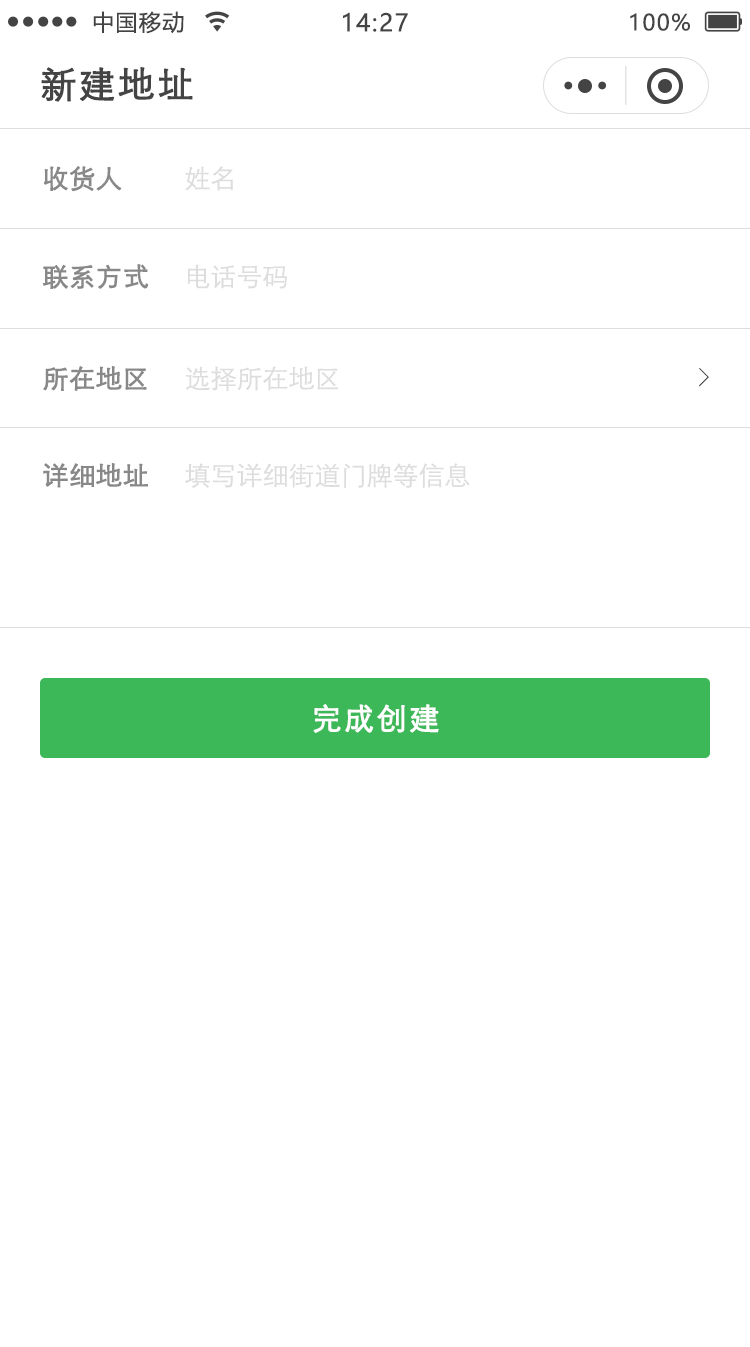
<style>
.page{position:relative;width:750px;height:1347px;background:#ffffff}
.page>*{position:absolute;margin:0}
.t1{font:22px "MicrosoftYaHei";letter-spacing:0.06em;color:#444444}
.t2{font:24px "MicrosoftYaHei";letter-spacing:0.06em;color:#444444}
.t3{font:36px "STXihei";letter-spacing:0.06em;color:#444444;font-weight:bold}
.t4{font:26px "STXihei";color:#888888;font-weight:bold}
.t5{font:26px "STXihei";color:#dddddd}
.t6{font:26px "SimSun";color:#444444}
.t7{font:30px "STXihei";letter-spacing:0.06em;color:#ffffff;font-weight:bold}
</style>
<div class="page">
<p class="t1" style="left:93px;top:11px;width:91px;height:23px">中国移动</p>
<p class="t2" style="left:343px;top:12px;width:65px;height:20px">14:27</p>
<p class="t1" style="left:630px;top:13px;width:60px;height:18px">100%</p>
<p class="t3" style="left:41px;top:67px;width:152px;height:35px">新建地址</p>
<p class="t4" style="left:43px;top:166px;width:79px;height:26px">收货人</p>
<p class="t5" style="left:185px;top:166px;width:48px;height:25px">姓名</p>
<p class="t4" style="left:42px;top:264px;width:107px;height:25px">联系方式</p>
<p class="t5" style="left:187px;top:264px;width:100px;height:25px">电话号码</p>
<p class="t4" style="left:43px;top:366px;width:104px;height:25px">所在地区</p>
<p class="t5" style="left:185px;top:366px;width:153px;height:25px">选择所在地区</p>
<p class="t6" style="left:699px;top:368px;width:10px;height:19px">&gt;</p>
<p class="t4" style="left:43px;top:463px;width:105px;height:25px">详细地址</p>
<p class="t5" style="left:185px;top:463px;width:285px;height:25px">填写详细街道门牌等信息</p>
<p class="t7" style="left:313px;top:704px;width:126px;height:29px">完成创建</p>
</div>
